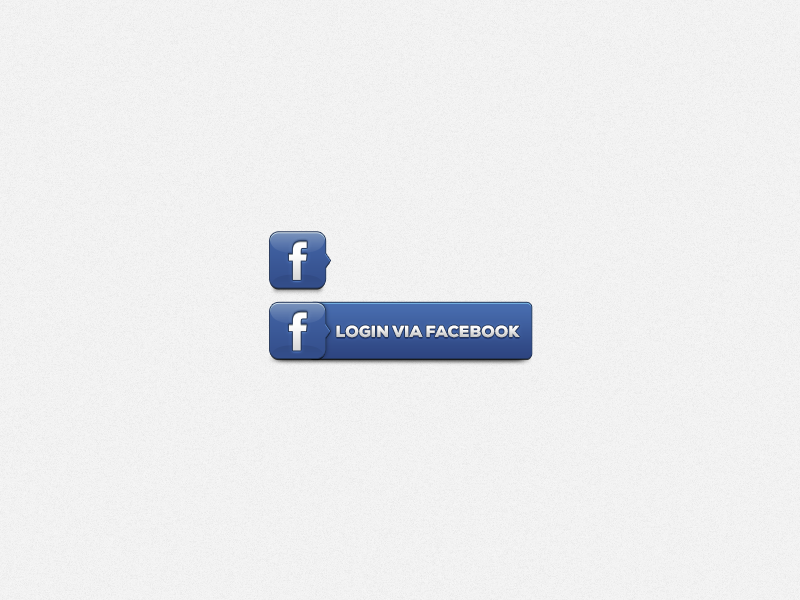
<style>
.page{position:relative;width:800px;height:600px}
.page>*{position:absolute;margin:0}
.t1{font:16px "NexaBlack";text-transform:uppercase}
</style>
<div class="page">
<p class="t1" style="left:336px;top:325px;width:184px;height:13px">LOGIN VIA FACEBOOK</p>
</div>
